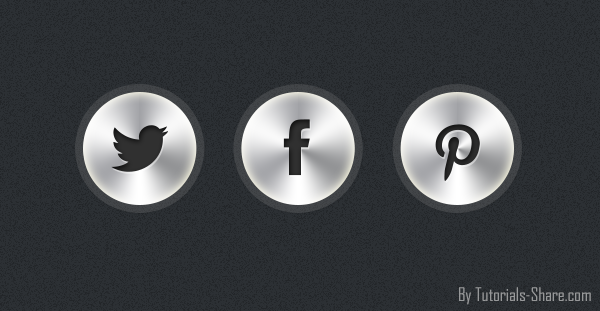
<style>
.page{position:relative;width:600px;height:311px;background:#2c3034}
.page>*{position:absolute;margin:0}
.t1{font:18px "AgencyFB-Reg";color:#97999a}
</style>
<div class="page">
<p class="t1" style="left:459px;top:287px;width:132px;height:18px">By Tutorials-Share.com</p>
</div>
